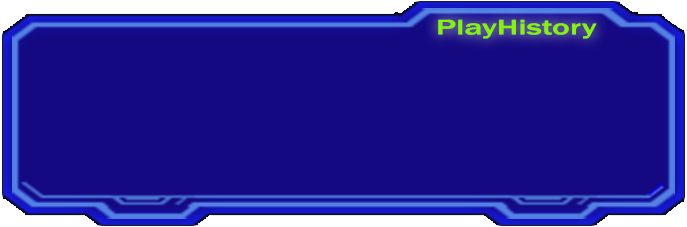
<style>
.page{position:relative;width:687px;height:227px;background:#140981}
.page>*{position:absolute;margin:0}
.t1{font:22px "FranklinGothic-Medium";color:#84f400;scale:1.53 1}
</style>
<div class="page">
<p class="t1" style="left:438px;top:19px;width:159px;height:20px">PlayHistory</p>
</div>
